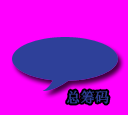
<style>
.page{position:relative;width:128px;height:115px;background:#ff00ff}
.page>*{position:absolute;margin:0}
.t1{font:14px "SimSun";color:#2e4099;font-weight:bold}
</style>
<div class="page">
<p class="t1" style="left:67px;top:90px;width:42px;height:14px">总筹码</p>
</div>
